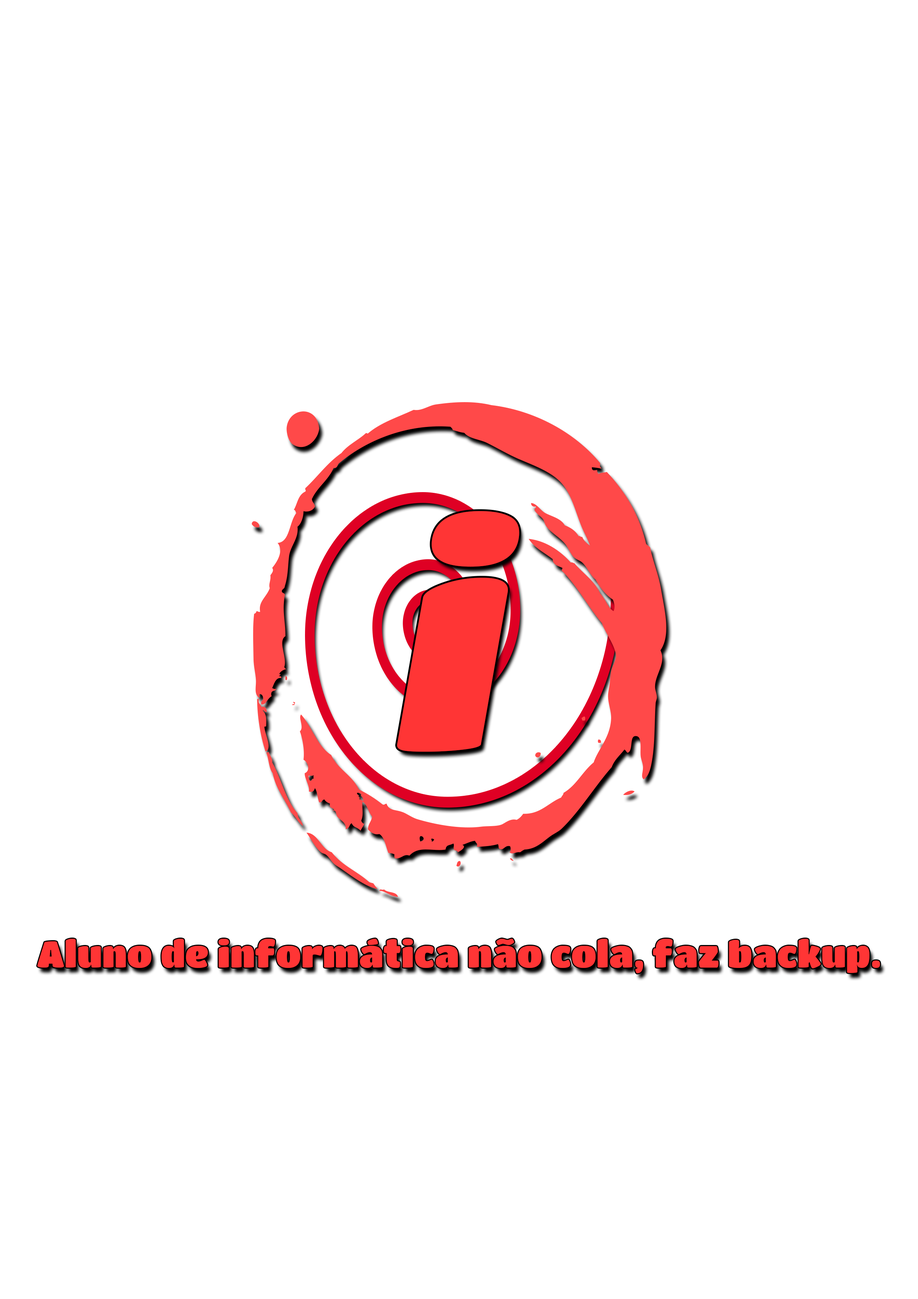
<style>
.page{position:relative;width:918px;height:1299px;background:#ffffff}
.page>*{position:absolute;margin:0}
.t1{font:313.2px "TitanOne";color:#ff3535}
.t2{font:37px "TitanOne";color:#ff3535}
</style>
<div class="page">
<p class="t1" style="left:397px;top:511px;width:122px;height:241px">i</p>
<p class="t2" style="left:37px;top:939px;width:843px;height:34px">Aluno de informática não cola, faz backup.</p>
</div>
